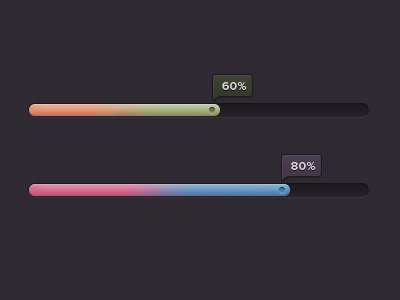
<style>
.page{position:relative;width:400px;height:300px;background:#2d2830}
.page>*{position:absolute;margin:0}
.t1{font:12px "ProximaNova-Semibold";letter-spacing:0.04em;color:#dadada}
</style>
<div class="page">
<p class="t1" style="left:222px;top:82px;width:25px;height:8px">60%</p>
<p class="t1" style="left:291px;top:162px;width:25px;height:8px">80%</p>
</div>
